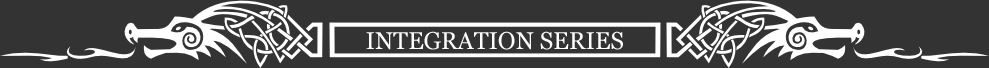
<style>
.page{position:relative;width:989px;height:68px;background:#333333}
.page>*{position:absolute;margin:0}
.t1{font:23.9px "Georgia";color:#ffffff}
</style>
<div class="page">
<p class="t1" style="left:366px;top:31px;width:257px;height:19px">INTEGRATION SERIES</p>
</div>
